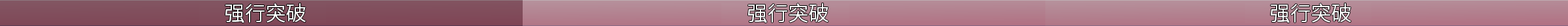
<style>
.page{position:relative;width:1568px;height:26px}
.page>*{position:absolute;margin:0}
.t1{font:20.6px "SourceHanSansSC-Normal";color:#ffffff}
</style>
<div class="page">
<p class="t1" style="left:225px;top:3px;width:81px;height:20px">强行突破</p>
<p class="t1" style="left:747px;top:3px;width:81px;height:20px">强行突破</p>
<p class="t1" style="left:1270px;top:3px;width:81px;height:20px">强行突破</p>
</div>
